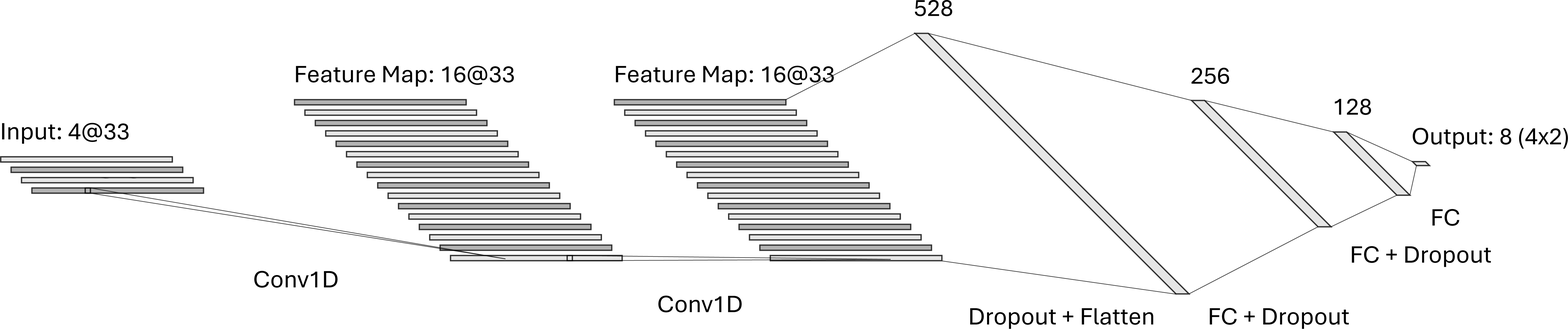
<style>
.page{position:relative;width:1568px;height:329px;background:#ffffff}
.page>*{position:absolute;margin:0}
.t1{font:24.8px "Aptos";color:#000000}
</style>
<div class="page">
<p class="t1" style="left:915px;top:0px;width:37px;height:16px">528</p>
<p class="t1" style="left:296px;top:66px;width:218px;height:21px">Feature Map: 16@33</p>
<p class="t1" style="left:616px;top:66px;width:218px;height:21px">Feature Map: 16@33</p>
<p class="t1" style="left:1191px;top:68px;width:38px;height:16px">256</p>
<p class="t1" style="left:1335px;top:99px;width:36px;height:16px">128</p>
<p class="t1" style="left:2px;top:123px;width:127px;height:21px">Input: 4@33</p>
<p class="t1" style="left:1413px;top:128px;width:155px;height:21px">Output: 8 (4x2)</p>
<p class="t1" style="left:1432px;top:209px;width:27px;height:17px">FC</p>
<p class="t1" style="left:1352px;top:246px;width:139px;height:21px">FC + Dropout</p>
<p class="t1" style="left:254px;top:271px;width:84px;height:17px">Conv1D</p>
<p class="t1" style="left:658px;top:296px;width:84px;height:17px">Conv1D</p>
<p class="t1" style="left:970px;top:309px;width:183px;height:20px">Dropout + Flatten</p>
<p class="t1" style="left:1210px;top:308px;width:139px;height:21px">FC + Dropout</p>
</div>
